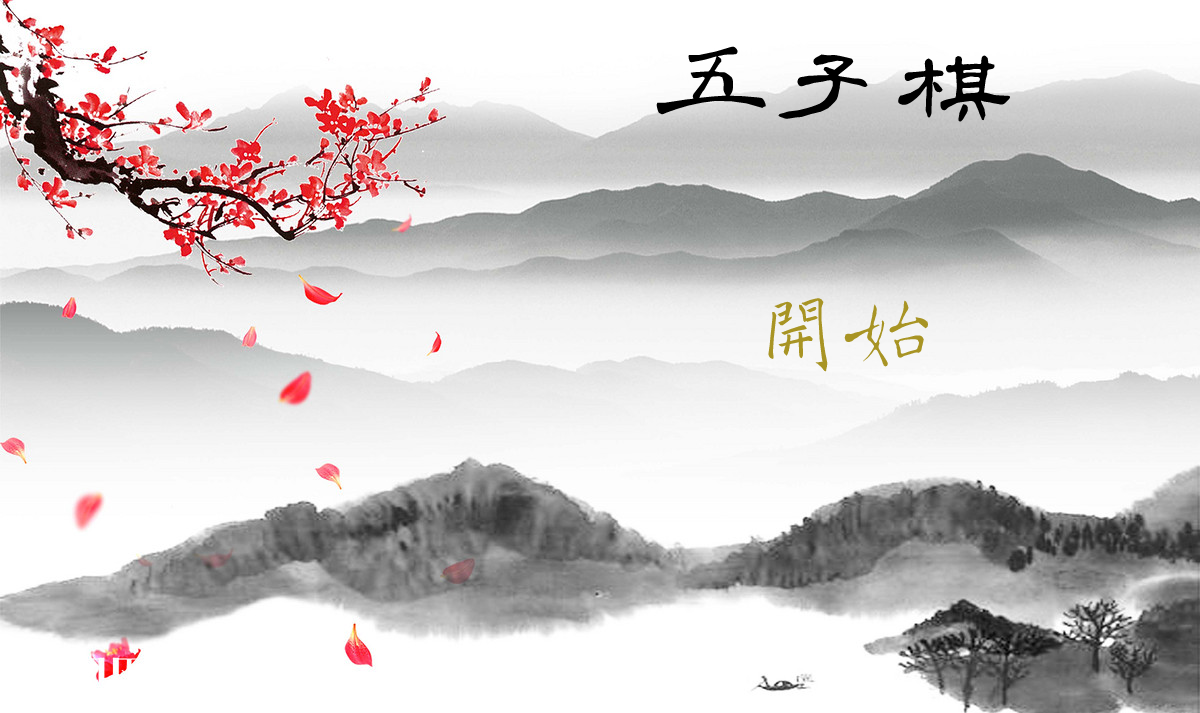
<style>
.page{position:relative;width:1200px;height:713px}
.page>*{position:absolute;margin:0}
.t1{font:120px "HYs1gf";color:#000000}
.t2{font:120px "HYc5gf";color:#000000}
.t3{font:90px "HYc5gf";color:#a89424}
</style>
<div class="page">
<p class="t1" style="left:656px;top:46px;width:354px;height:76px"><span class="t2">五</span>子棋</p>
<p class="t3" style="left:768px;top:298px;width:160px;height:74px">开始</p>
</div>
